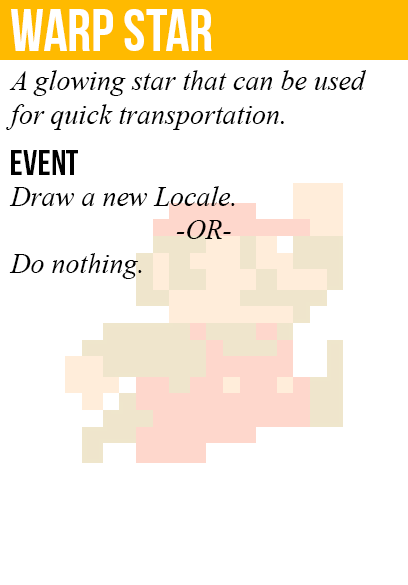
<style>
.page{position:relative;width:408px;height:585px;background:#ffffff}
.page>*{position:absolute;margin:0}
.t1{font:60px "BebasNeue";color:#ffffff}
.t2{font:28px "TimesNewRomanPS-ItalicMT";color:#000000}
.t3{font:36px "BebasNeue";color:#000000}
</style>
<div class="page">
<p class="t1" style="left:11px;top:9px;width:201px;height:42px">warp star</p>
<p class="t2" style="left:6px;top:70px;width:360px;height:60px">A glowing star that can be used<br>for quick transportation.</p>
<p class="t3" style="left:11px;top:150px;width:67px;height:25px">event</p>
<p class="t2" style="left:9px;top:186px;width:226px;height:93px">Draw a new Locale.<br><br>Do nothing.</p>
<p class="t2" style="left:176px;top:220px;width:55px;height:19px">-OR-</p>
</div>
